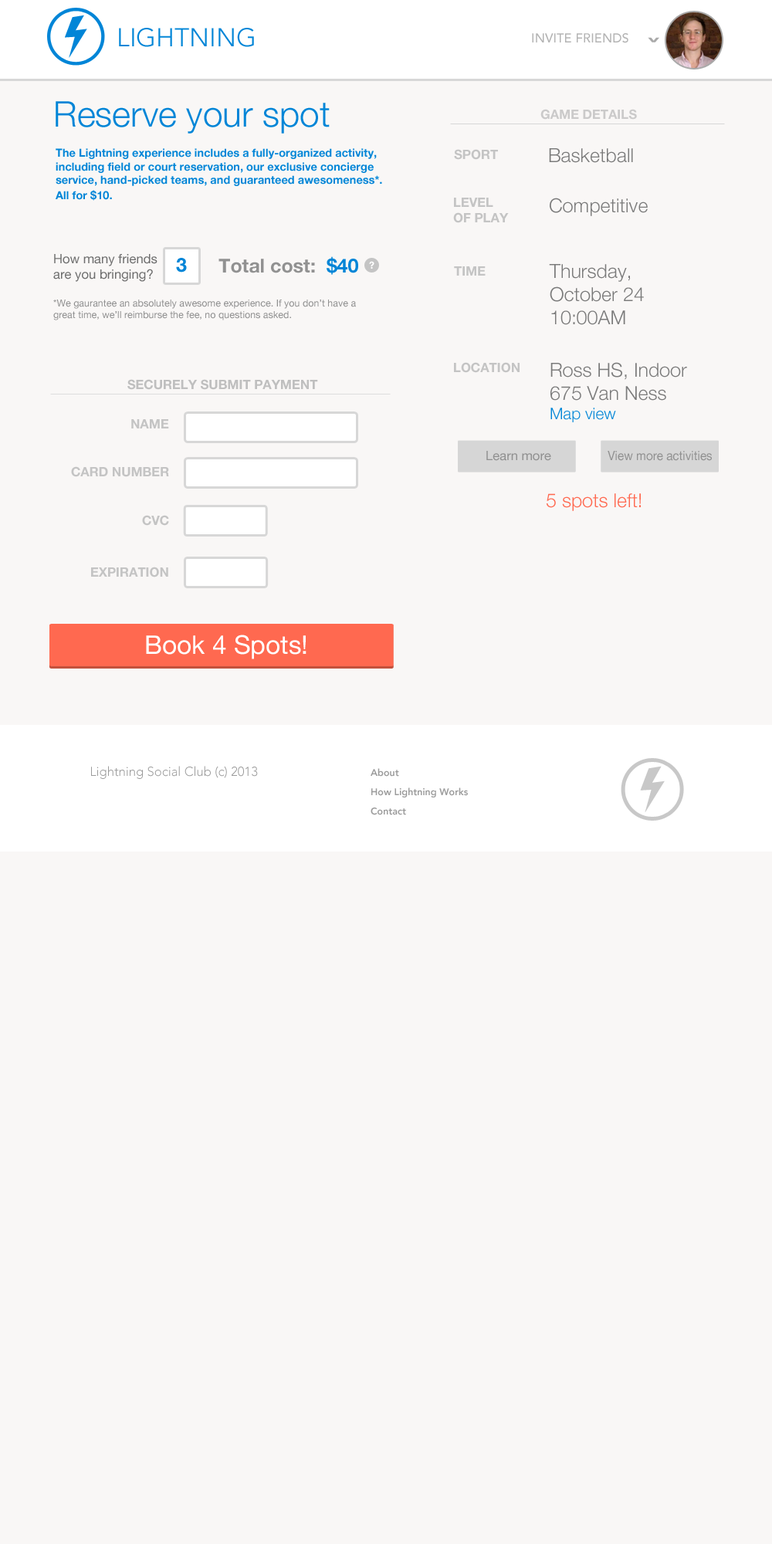
<style>
.page{position:relative;width:772px;height:1544px;background:#f9f7f6}
.page>*{position:absolute;margin:0}
.t1{font:25.7px "AvenirLTPro-Light";color:#0085d7;text-transform:uppercase}
.t2{font:12.9px "AvenirLTPro-Medium";color:#b2b2b2;text-transform:uppercase}
.t3{font:12.9px "AvenirLTPro-Black";color:#a9a9a9;text-transform:uppercase;scale:1.72 1}
.t4{font:35.4px "HelveticaNeue-Light";color:#0085d7}
.t5{font:12.9px "HelveticaNeue-Bold";color:#cbcaca}
.t6{font:11.3px "HelveticaNeue-Bold";color:#0085d7}
.t7{font:12.9px "HelveticaNeue-Bold";color:#c4c4c4}
.t8{font:19.3px "HelveticaNeue-Light";color:#7a7a7a}
.t9{font:12.9px "HelveticaNeue";color:#6e6e6e}
.t10{font:19.3px "HelveticaNeue-Bold";color:#0085d7}
.t11{font:19.3px "HelveticaNeue-Bold";color:#919191}
.t12{font:9.7px "HelveticaNeue-Bold";color:#ffffff}
.t13{font:9.7px "HelveticaNeue";color:#919191}
.t14{font:16.1px "HelveticaNeue-Light";color:#0085d7}
.t15{font:12.9px "HelveticaNeue-Bold";color:#bfbfbf;text-transform:uppercase}
.t16{font:12.9px "HelveticaNeue";color:#909090}
.t17{font:12.9px "HelveticaNeue";color:#909090;scale:0.91 1}
.t18{font:19.3px "HelveticaNeue-Light";color:#ff6950}
.t19{font:25.7px "HelveticaNeue";color:#ffffff}
.t20{font:25.7px "HelveticaNeue";color:#ffffff;text-transform:uppercase}
.t21{font:12.9px "AvenirLTPro-Light";color:#9b9b9b}
.t22{font:9.7px/19.3px "AvenirLTPro-Heavy";color:#9b9b9b}
</style>
<div class="page">
<p class="t1" style="left:119px;top:28px;width:135px;height:19px">Lightning</p>
<p class="t2" style="left:532px;top:33px;width:97px;height:10px">Invite Friends</p>
<p class="t3" style="left:648px;top:37px;width:11px;height:5px;rotate:180deg">^</p>
<p class="t4" style="left:56px;top:101px;width:274px;height:33px">Reserve your spot</p>
<p class="t5" style="left:541px;top:109px;width:96px;height:11px">GAME DETAILS</p>
<p class="t6" style="left:56px;top:148px;width:326px;height:53px">The Lightning experience includes a fully-organized activity, <br>including field or court reservation, our exclusive concierge <br>service, hand-picked teams, and guaranteed awesomeness*.<br>All for $10.</p>
<p class="t7" style="left:454px;top:149px;width:44px;height:11px">SPORT</p>
<p class="t8" style="left:549px;top:148px;width:84px;height:15px">Basketball</p>
<p class="t7" style="left:453px;top:198px;width:56px;height:25px">LEVEL <br>OF PLAY</p>
<p class="t8" style="left:550px;top:198px;width:98px;height:18px">Competitive</p>
<p class="t9" style="left:53px;top:254px;width:105px;height:28px">How many friends <br>are you bringing?</p>
<p class="t10" style="left:176px;top:258px;width:11px;height:15px">3</p>
<p class="t11" style="left:219px;top:256px;width:139px;height:19px">Total cost:  <span class="t10">$40</span></p>
<p class="t12" style="left:369px;top:261px;width:5px;height:8px">?</p>
<p class="t7" style="left:454px;top:266px;width:32px;height:10px">TIME</p>
<p class="t8" style="left:549px;top:264px;width:95px;height:61px">Thursday,<br>October 24<br>10:00AM</p>
<p class="t13" style="left:53px;top:300px;width:303px;height:20px">*We gaurantee an absolutely awesome experience. If you don’t have a <br>great time, we’ll reimburse the fee, no questions asked.</p>
<p class="t7" style="left:454px;top:362px;width:66px;height:11px">LOCATION</p>
<p class="t8" style="left:551px;top:362px;width:136px;height:60px">Ross HS, Indoor<br>675 Van Ness<br><span class="t14">Map view</span></p>
<p class="t15" style="left:127px;top:379px;width:191px;height:11px">Securely submit payment</p>
<p class="t7" style="left:131px;top:419px;width:38px;height:10px">NAME</p>
<p class="t16" style="left:486px;top:451px;width:65px;height:10px">Learn more</p>
<p class="t17" style="left:608px;top:451px;width:104px;height:10px">View more activities</p>
<p class="t7" style="left:71px;top:466px;width:98px;height:11px">CARD NUMBER</p>
<p class="t18" style="left:547px;top:493px;width:94px;height:18px">5 spots left!</p>
<p class="t7" style="left:142px;top:515px;width:27px;height:11px">CVC</p>
<p class="t7" style="left:91px;top:567px;width:77px;height:11px">EXPIRATION</p>
<p class="t19" style="left:146px;top:635px;width:161px;height:24px"><span class="t20">B</span>ook 4 Spots!</p>
<p class="t21" style="left:91px;top:766px;width:167px;height:13px">Lightning Social Club (c) 2013</p>
<p class="t22" style="left:371px;top:768px;width:97px;height:47px">About<br>How Lightning Works<br>Contact</p>
</div>
